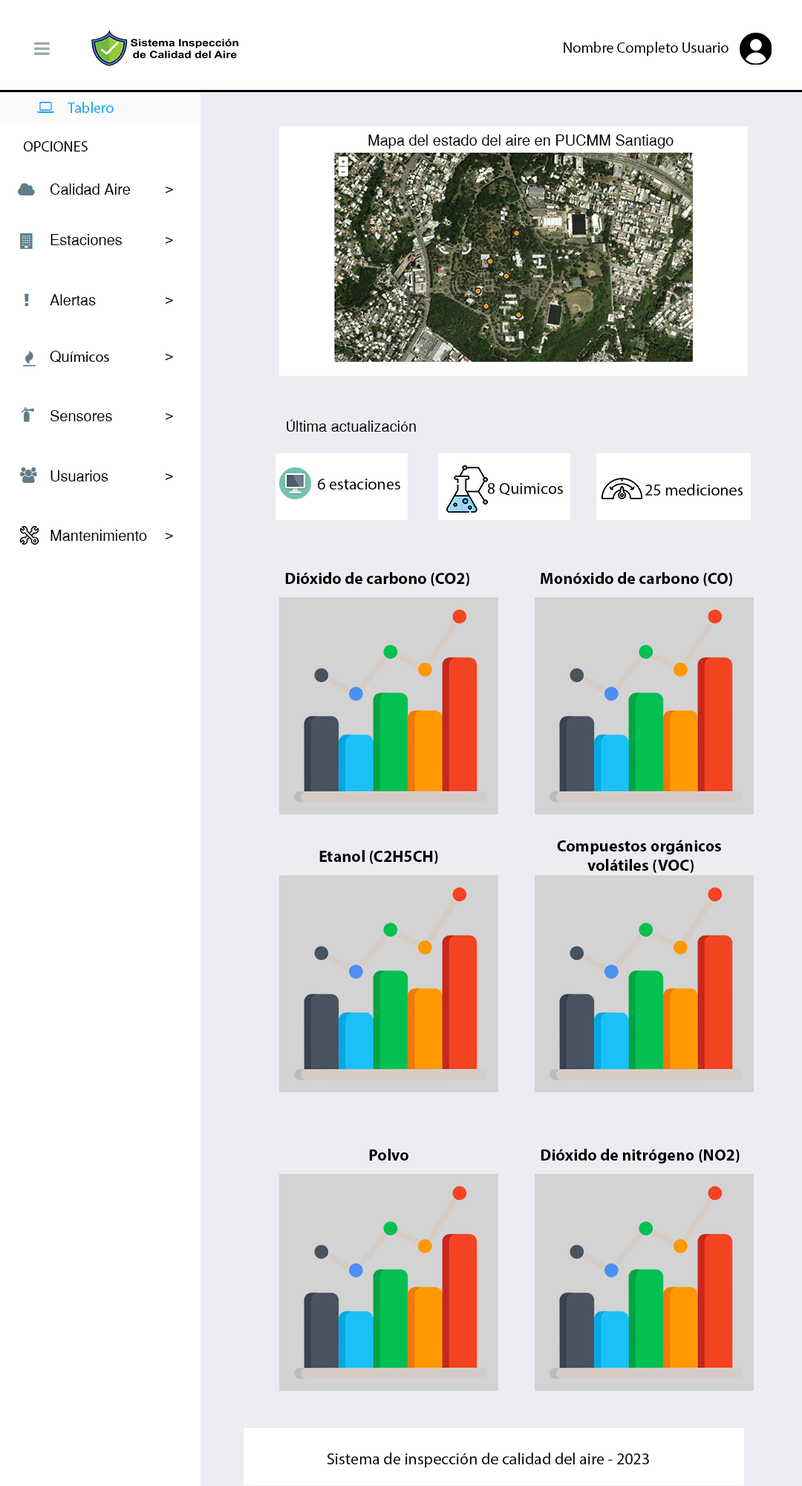
<style>
.page{position:relative;width:802px;height:1486px;background:#ffffff}
.page>*{position:absolute;margin:0}
.t1{font:14.9px "MyriadPro-Regular";color:#000000}
.t2{font:14.9px "MyriadPro-Regular";color:#03a9f3}
.t3{font:14.9px "SansSerif";color:#000000}
.t4{font:16.3px "MyriadPro-Regular";color:#000000}
.t5{font:16.3px "MyriadPro-Bold";color:#000000}
</style>
<div class="page">
<p class="t1" style="left:564px;top:42px;width:165px;height:14px">Nombre Completo Usuario</p>
<p class="t2" style="left:68px;top:102px;width:46px;height:11px">Tablero</p>
<p class="t3" style="left:369px;top:134px;width:305px;height:15px">Mapa del estado del aire en PUCMM Santiago</p>
<p class="t1" style="left:24px;top:141px;width:64px;height:11px">OPCIONES</p>
<p class="t3" style="left:50px;top:184px;width:81px;height:11px">Calidad Aire</p>
<p class="t3" style="left:165px;top:186px;width:8px;height:7px">&gt;</p>
<p class="t3" style="left:51px;top:234px;width:71px;height:11px">Estaciones</p>
<p class="t3" style="left:165px;top:237px;width:8px;height:7px">&gt;</p>
<p class="t3" style="left:50px;top:294px;width:46px;height:11px">Alertas</p>
<p class="t3" style="left:165px;top:297px;width:8px;height:7px">&gt;</p>
<p class="t1" style="left:50px;top:351px;width:59px;height:12px"><span class="t3">Qu</span>ímicos</p>
<p class="t3" style="left:165px;top:354px;width:8px;height:6px">&gt;</p>
<p class="t3" style="left:51px;top:410px;width:61px;height:11px">Sensores</p>
<p class="t3" style="left:165px;top:413px;width:8px;height:7px">&gt;</p>
<p class="t3" style="left:287px;top:419px;width:129px;height:13px"><span class="t1">Ú</span>ltima actualizaci<span class="t1">ó</span>n</p>
<p class="t3" style="left:51px;top:470px;width:57px;height:11px">Usuarios</p>
<p class="t3" style="left:165px;top:473px;width:8px;height:7px">&gt;</p>
<p class="t4" style="left:317px;top:478px;width:83px;height:12px">6 estaciones</p>
<p class="t4" style="left:487px;top:483px;width:76px;height:13px">8 Quimicos</p>
<p class="t4" style="left:646px;top:484px;width:98px;height:12px">25 mediciones</p>
<p class="t3" style="left:51px;top:530px;width:96px;height:11px">Mantenimiento</p>
<p class="t3" style="left:165px;top:533px;width:8px;height:6px">&gt;</p>
<p class="t5" style="left:285px;top:572px;width:185px;height:14px">Dióxido de carbono (CO2)</p>
<p class="t5" style="left:541px;top:572px;width:192px;height:14px">Monóxido de carbono (CO)</p>
<p class="t5" style="left:557px;top:840px;width:164px;height:33px;text-align:center">Compuestos orgánicos <br>volátiles (VOC)</p>
<p class="t5" style="left:319px;top:850px;width:119px;height:14px">Etanol (C2H5CH)</p>
<p class="t5" style="left:369px;top:1149px;width:40px;height:12px">Polvo</p>
<p class="t5" style="left:541px;top:1149px;width:199px;height:15px">Dióxido de nitrógeno (NO2)</p>
<p class="t4" style="left:327px;top:1453px;width:322px;height:14px">Sistema de inspección de calidad del aire - 2023</p>
</div>
